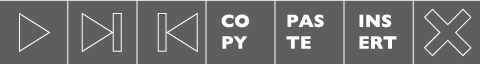
<style>
.page{position:relative;width:480px;height:64px;background:#5f5e5e}
.page>*{position:absolute;margin:0}
.t1{font:18px "GillSans-Bold";color:#ffffff}
</style>
<div class="page">
<p class="t1" style="left:221px;top:14px;width:28px;height:35px">CO<br>PY</p>
<p class="t1" style="left:286px;top:14px;width:38px;height:35px">PAS<br>TE</p>
<p class="t1" style="left:359px;top:14px;width:38px;height:35px">INS<br>ERT</p>
</div>
